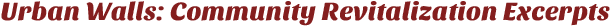
<style>
.page{position:relative;width:611px;height:27px;background:#ffffff}
.page>*{position:absolute;margin:0}
.t1{font:26px "SansitaOne";color:#841e1e}
</style>
<div class="page">
<p class="t1" style="left:1px;top:1px;width:609px;height:25px">Urban Walls: Community Revitalization Excerpts</p>
</div>
